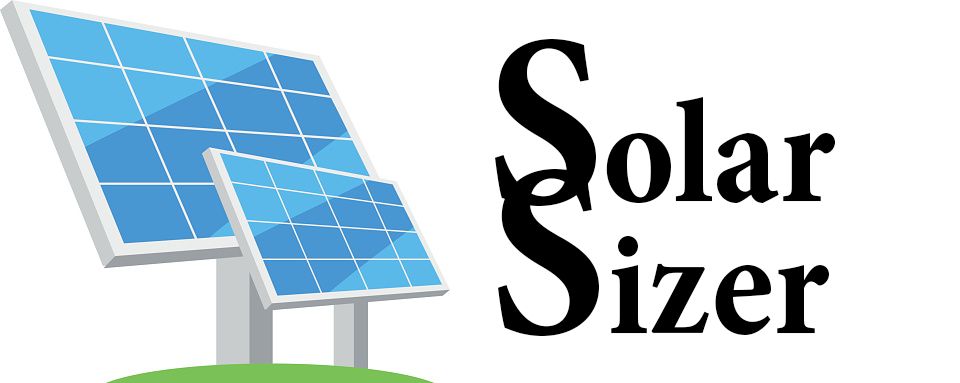
<style>
.page{position:relative;width:960px;height:383px;background:#ffffff}
.page>*{position:absolute;margin:0}
.t1{font:250px "MinionPro-BoldCn";color:#000000}
.t2{font:150px "MinionPro-BoldCn";color:#000000}
</style>
<div class="page">
<p class="t1" style="left:495px;top:39px;width:101px;height:167px">S</p>
<p class="t2" style="left:606px;top:97px;width:230px;height:106px">olar</p>
<p class="t1" style="left:498px;top:169px;width:101px;height:167px">S</p>
<p class="t2" style="left:611px;top:235px;width:219px;height:100px">izer</p>
</div>
